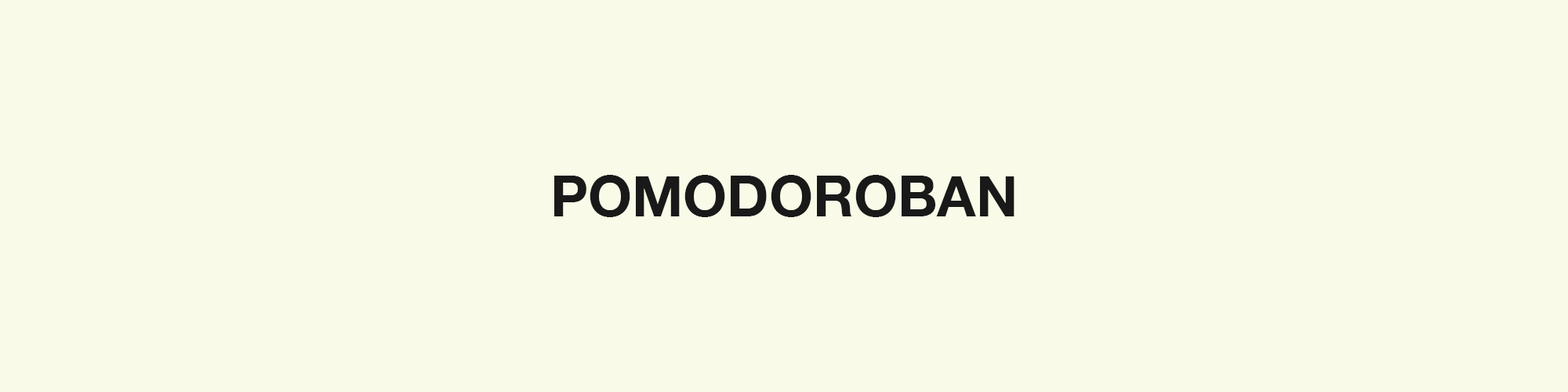
<style>
.page{position:relative;width:1568px;height:392px;background:#f9fae7}
.page>*{position:absolute;margin:0}
.t1{font:56.4px "HelveticaNeue-Bold";color:#191919}
</style>
<div class="page">
<p class="t1" style="left:554px;top:175px;width:460px;height:42px">POMODOROBAN</p>
</div>
